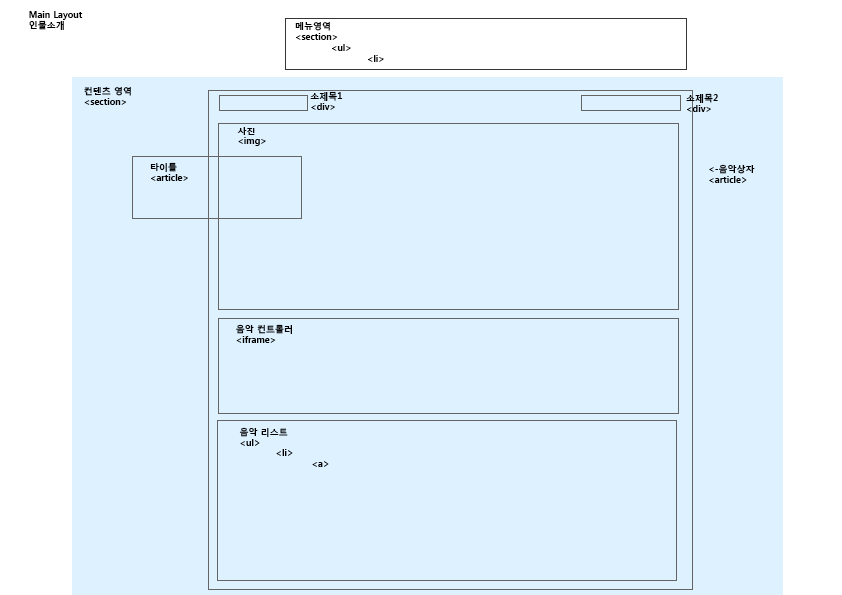
<style>
.page{position:relative;width:842px;height:595px;background:#ddf1ff}
.page>*{position:absolute;margin:0}
.t1{font:9px "MalgunGothicBold";color:#000000}
</style>
<div class="page">
<p class="t1" style="left:29px;top:11px;width:54px;height:19px">Main Layout<br>인물소개</p>
<p class="t1" style="left:295px;top:21px;width:89px;height:41px">메뉴영역<br>&lt;section&gt;<br> &lt;ul&gt;<br>  &lt;li&gt;</p>
<p class="t1" style="left:84px;top:86px;width:47px;height:19px">컨텐츠 영역<br>&lt;section&gt;</p>
<p class="t1" style="left:310px;top:91px;width:33px;height:19px">소제목1<br>&lt;div&gt;</p>
<p class="t1" style="left:686px;top:93px;width:32px;height:19px">소제목2<br>&lt;div&gt;</p>
<p class="t1" style="left:237px;top:127px;width:29px;height:19px">사진<br>&lt;img&gt;</p>
<p class="t1" style="left:150px;top:162px;width:38px;height:19px">타이틀<br>&lt;article&gt;</p>
<p class="t1" style="left:709px;top:164px;width:46px;height:19px">&lt;-음악상자<br>&lt;article&gt;</p>
<p class="t1" style="left:236px;top:324px;width:56px;height:19px">음악 컨트롤러<br>&lt;iframe&gt;</p>
<p class="t1" style="left:239px;top:427px;width:90px;height:40px">음악 리스트<br>&lt;ul&gt;<br> &lt;li&gt;<br>  &lt;a&gt;</p>
</div>
